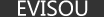
<style>
.page{position:relative;width:104px;height:17px;background:#333333}
.page>*{position:absolute;margin:0}
.t1{font:20px "MicrosoftYaHei";color:#ffffff}
</style>
<div class="page">
<p class="t1" style="left:18px;top:0px;width:70px;height:16px">EVISOU</p>
</div>
